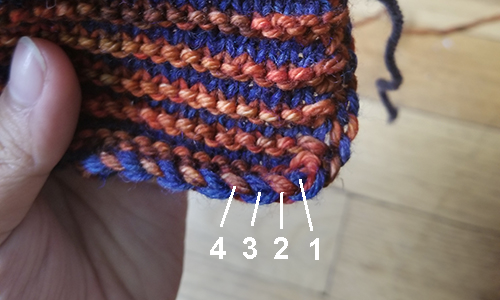
<style>
.page{position:relative;width:500px;height:300px}
.page>*{position:absolute;margin:0}
.t1{font:30px "Arial-BoldMT";color:#ffffff}
</style>
<div class="page">
<p class="t1" style="left:210px;top:237px;width:16px;height:22px">4</p>
<p class="t1" style="left:243px;top:237px;width:14px;height:22px">3</p>
<p class="t1" style="left:274px;top:237px;width:14px;height:22px">2</p>
<p class="t1" style="left:310px;top:238px;width:9px;height:22px">1</p>
</div>
